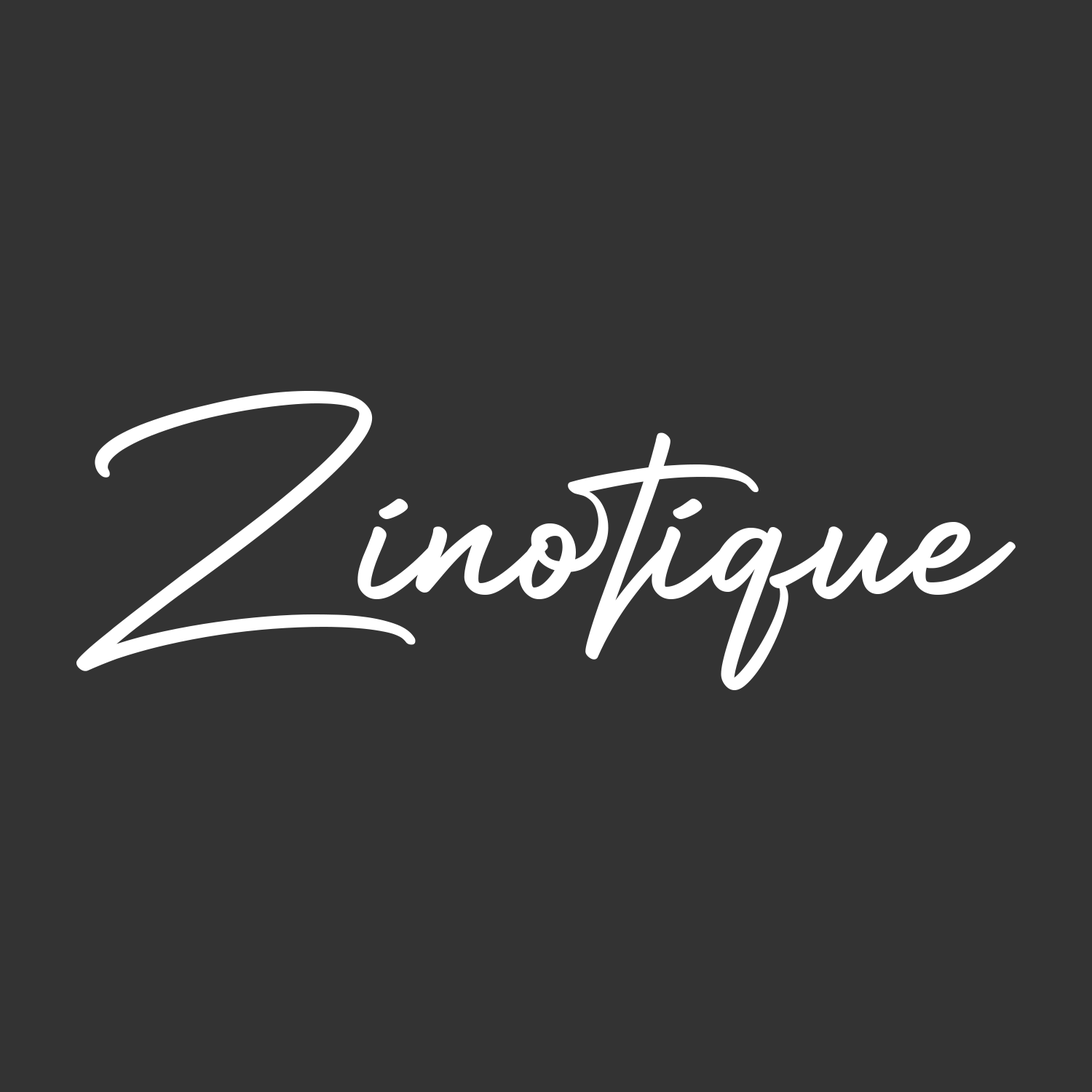
<style>
.page{position:relative;width:1092px;height:1092px;background:#333333}
.page>*{position:absolute;margin:0}
.t1{font:246.4px "Betterlett-Regular";letter-spacing:-0.005em;color:#ffffff}
</style>
<div class="page">
<p class="t1" style="left:76px;top:391px;width:940px;height:299px">Zinotique</p>
</div>
